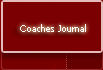
<style>
.page{position:relative;width:103px;height:70px;background:#7a0001}
.page>*{position:absolute;margin:0}
.t1{font:9px "Tahoma";color:#ffffff}
</style>
<div class="page">
<p class="t1" style="left:20px;top:24px;width:66px;height:8px">Coaches Journal</p>
</div>
